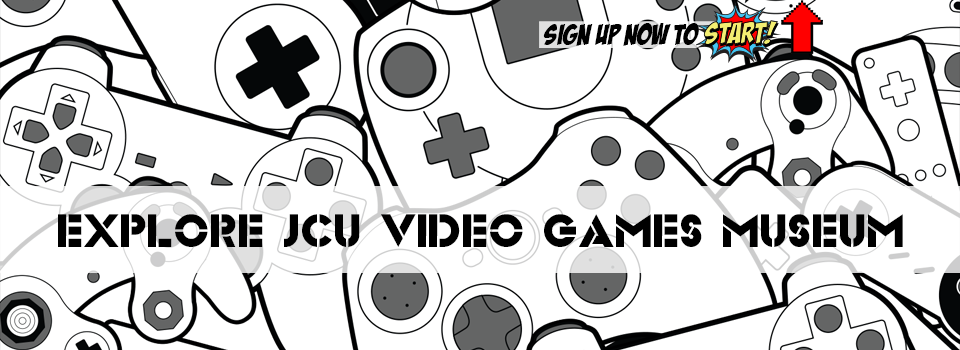
<style>
.page{position:relative;width:960px;height:350px;background:#ffffff}
.page>*{position:absolute;margin:0}
.t1{font:29.2px "BadaBoomBB";color:#000000}
.t2{font:48px "Videopac";color:#000000}
</style>
<div class="page">
<p class="t1" style="left:543px;top:23px;width:156px;height:23px">SIGN UP NOW TO</p>
<p class="t2" style="left:58px;top:214px;width:845px;height:33px">EXPLORE JCU VIDEO GAMES MUSEUM</p>
</div>
